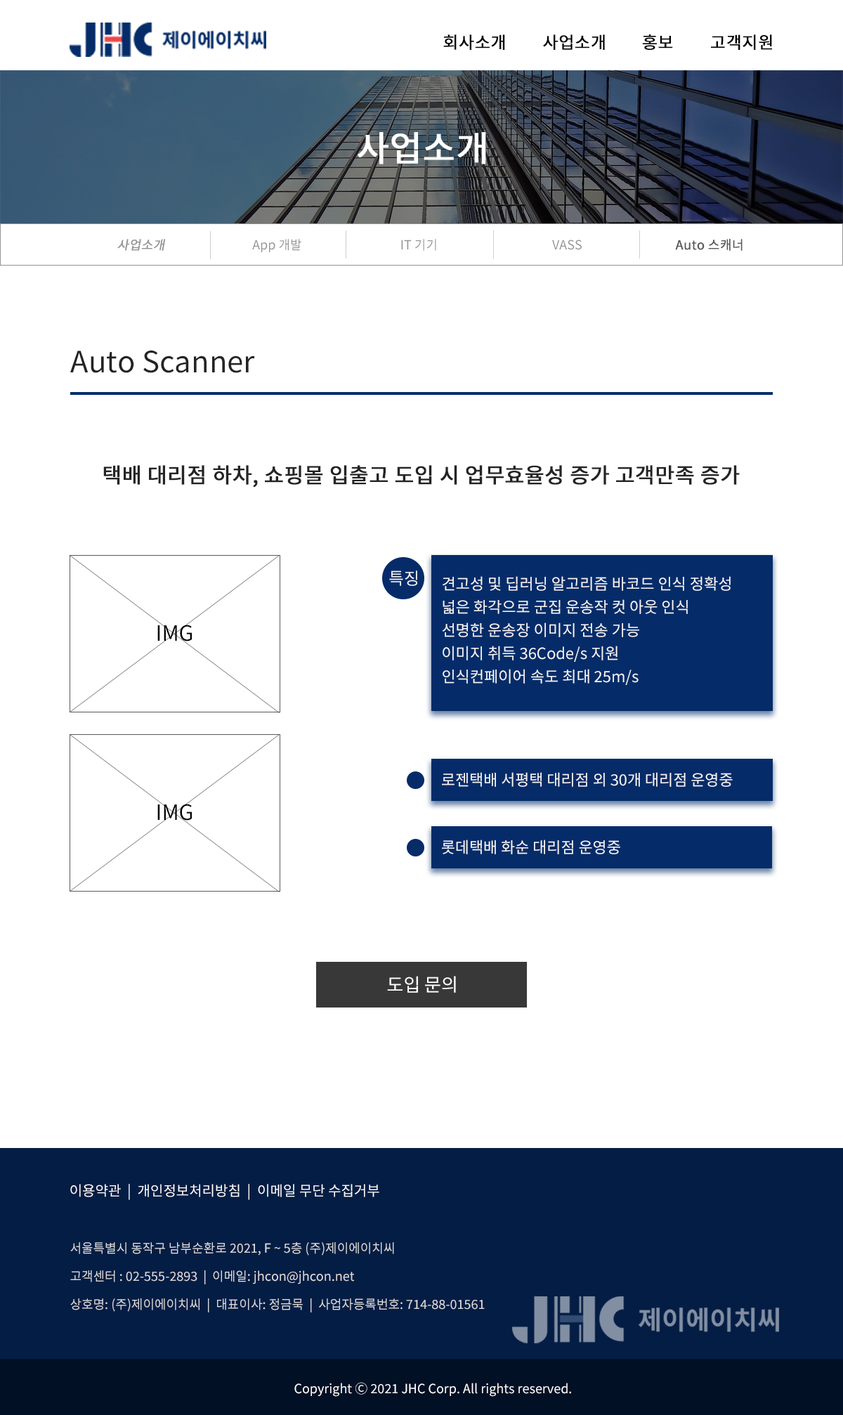
<style>
.page{position:relative;width:843px;height:1415px;background:#ffffff}
.page>*{position:absolute;margin:0}
.t1{font:16.9px "NotoSansKR-Regular";color:#000000;font-weight:bold}
.t2{font:35.1px "NotoSansKR-Regular";color:#ffffff;font-weight:bold}
.t3{font:12.6px "NotoSansKR-Regular";color:#959595;font-weight:bold;font-style:italic}
.t4{font:12.6px "NotoSansKR-Regular";color:#959595}
.t5{font:12.6px "NotoSansKR-Regular";color:#595959;font-weight:bold}
.t6{font:29.5px "NotoSansKR-Regular";color:#242424}
.t7{font:21.1px "NotoSansKR-Regular";color:#242424;font-weight:bold}
.t8{font:16.9px "NotoSansKR-Regular";color:#f5f5f5}
.t9{font:15.5px/23.2px "NotoSansKR-Regular";color:#f5f5f5}
.t10{font:21.1px "NotoSansKR-Regular";color:#000000}
.t11{font:15.5px "NotoSansKR-Regular";color:#f5f5f5}
.t12{font:18.3px "NotoSansKR-Regular";color:#ffffff}
.t13{font:14px "NotoSansKR-Regular";color:#ffffff}
.t14{font:12.6px/28.1px "NotoSansKR-Regular";color:#dddddd}
.t15{font:12.6px "NotoSansKR-Regular";color:#ffffff}
</style>
<div class="page">
<p class="t1" style="left:443px;top:34px;width:62px;height:16px">회사소개</p>
<p class="t1" style="left:543px;top:34px;width:62px;height:16px">사업소개</p>
<p class="t1" style="left:642px;top:34px;width:31px;height:16px">홍보</p>
<p class="t1" style="left:711px;top:34px;width:61px;height:16px">고객지원</p>
<p class="t2" style="left:358px;top:132px;width:128px;height:32px">사업소개</p>
<p class="t3" style="left:117px;top:239px;width:49px;height:12px">사업소개</p>
<p class="t4" style="left:252px;top:239px;width:49px;height:13px">App 개발</p>
<p class="t4" style="left:401px;top:239px;width:35px;height:12px">IT 기기</p>
<p class="t4" style="left:552px;top:240px;width:30px;height:10px">VASS</p>
<p class="t5" style="left:675px;top:239px;width:67px;height:12px">Auto 스캐너</p>
<p class="t6" style="left:70px;top:350px;width:185px;height:23px">Auto Scanner</p>
<p class="t7" style="left:103px;top:465px;width:637px;height:22px">택배 대리점 하차, 쇼핑몰 입출고 도입 시 업무효율성 증가 고객만족 증가</p>
<p class="t8" style="left:389px;top:570px;width:28px;height:16px">특징</p>
<p class="t9" style="left:442px;top:576px;width:289px;height:109px">견고성 및 딥러닝 알고리즘 바코드 인식 정확성<br>넓은 화각으로 군집 운송작 컷 아웃 인식<br>선명한 운송장 이미지 전송 가능<br>이미지 취득 36Code/s 지원<br>인식컨페이어 속도 최대 25m/s</p>
<p class="t10" style="left:157px;top:624px;width:35px;height:17px">IMG</p>
<p class="t11" style="left:442px;top:772px;width:291px;height:15px">로젠택배 서평택 대리점 외 30개 대리점 운영중</p>
<p class="t10" style="left:157px;top:804px;width:35px;height:16px">IMG</p>
<p class="t11" style="left:442px;top:839px;width:178px;height:15px">롯데택배 화순 대리점 운영중</p>
<p class="t12" style="left:387px;top:976px;width:69px;height:17px">도입 문의</p>
<p class="t13" style="left:70px;top:1184px;width:309px;height:16px">이용약관  |  개인정보처리방침  |  이메일 무단 수집거부</p>
<p class="t14" style="left:70px;top:1242px;width:415px;height:70px">서울특별시 동작구 남부순환로 2021, F ~ 5층 (주)제이에이치씨<br>고객센터 : 02-555-2893  |  이메일: jhcon@jhcon.net<br>상호명: (주)제이에이치씨  |  대표이사: 정금묵  |  사업자등록번호: 714-88-01561</p>
<p class="t15" style="left:294px;top:1382px;width:277px;height:14px">Copyright Ⓒ 2021 JHC Corp. All rights reserved.</p>
</div>
